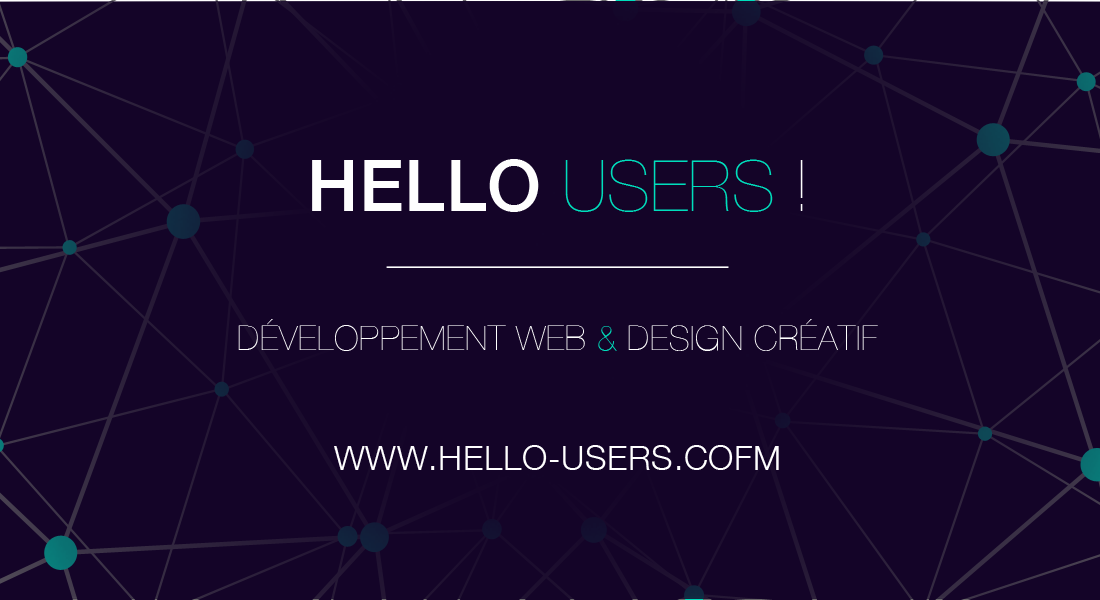
<style>
.page{position:relative;width:1100px;height:600px;background:#140428}
.page>*{position:absolute;margin:0}
.t1{font:71.1px "HelveticaNeue-Medium";letter-spacing:0.01em;color:#fefefe;text-transform:uppercase}
.t2{font:71.1px "HelveticaNeue-UltraLight";color:#00debc;text-transform:uppercase}
.t3{font:71.1px "HelveticaNeue-UltraLight";color:#fefefe;text-transform:uppercase}
.t4{font:33.8px "HelveticaNeue-UltraLight";letter-spacing:0.025em;color:#ffffff;text-transform:uppercase}
.t5{font:33.8px "HelveticaNeue-UltraLight";letter-spacing:0.025em;color:#00debc;text-transform:uppercase}
.t6{font:33.8px "HelveticaNeue-Light";letter-spacing:0.025em;color:#ffffff;text-transform:uppercase}
</style>
<div class="page">
<p class="t1" style="left:312px;top:159px;width:491px;height:53px">HELLO <span class="t2">USERS </span><span class="t3">!</span></p>
<p class="t4" style="left:238px;top:319px;width:640px;height:32px">DÉVELOPPEMENT WEB <span class="t5">&amp;</span> DESIGN CRÉATIF</p>
<p class="t6" style="left:334px;top:445px;width:445px;height:25px">www.hello-users.cofm</p>
</div>
